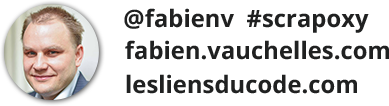
<style>
.page{position:relative;width:389px;height:106px;background:#ffffff}
.page>*{position:absolute;margin:0}
.t1{font:24px "OpenSans-Bold";color:#202121}
</style>
<div class="page">
<p class="t1" style="left:124px;top:8px;width:245px;height:25px">@fabienv  #scrapoxy</p>
<p class="t1" style="left:125px;top:40px;width:264px;height:20px">fabien.vauchelles.com</p>
<p class="t1" style="left:126px;top:74px;width:231px;height:20px">lesliensducode.com</p>
</div>
